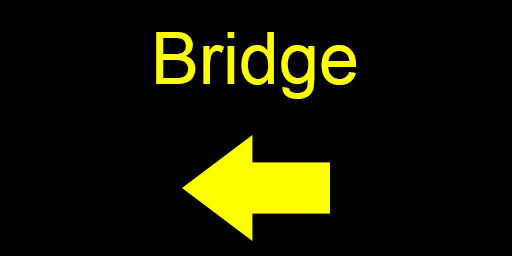
<style>
.page{position:relative;width:512px;height:256px;background:#000000}
.page>*{position:absolute;margin:0}
.t1{font:72px "ArialMT";color:#ffff00}
</style>
<div class="page">
<p class="t1" style="left:156px;top:32px;width:201px;height:67px">Bridge</p>
</div>
